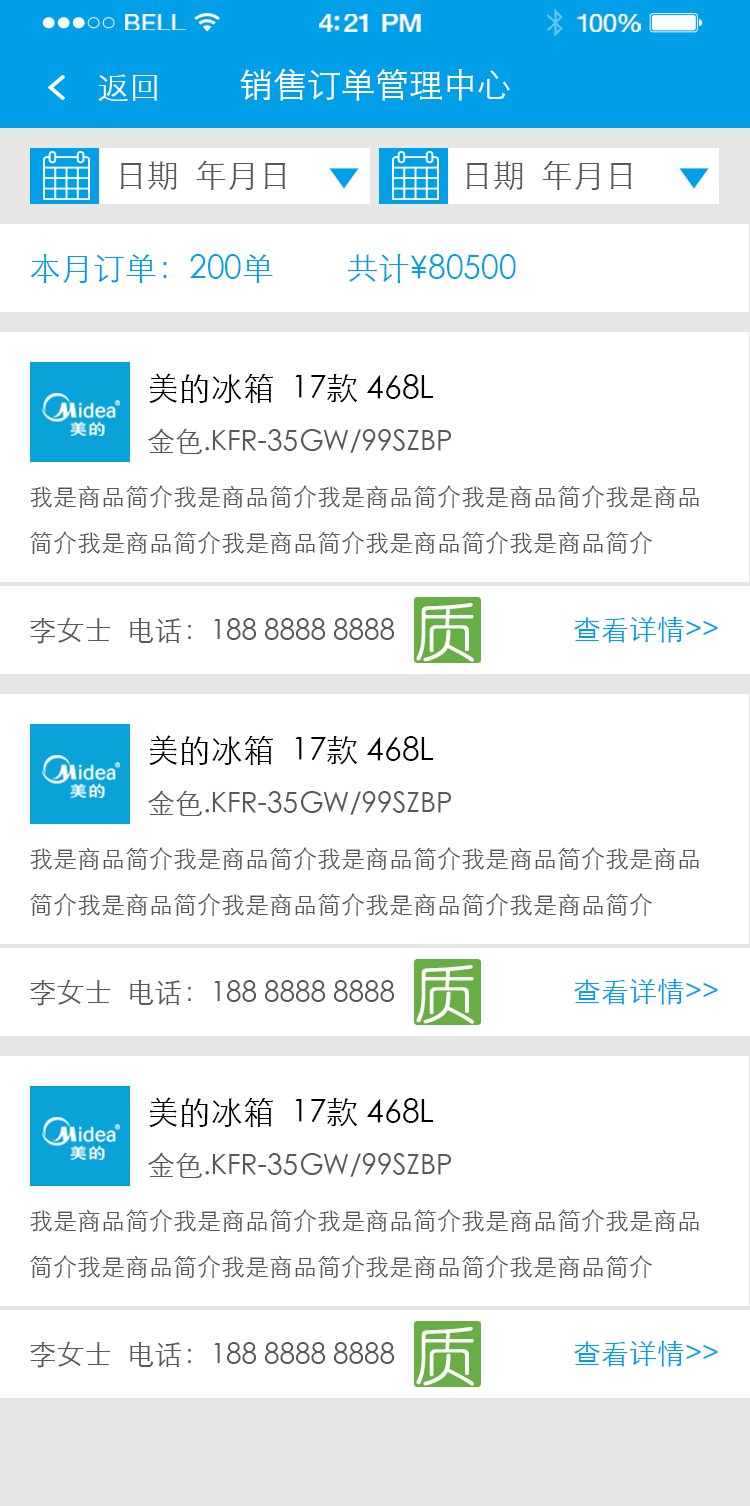
<style>
.page{position:relative;width:750px;height:1506px;background:#ffffff}
.page>*{position:absolute;margin:0}
.t1{font:23.3px "HelveticaNeue";letter-spacing:0.02em;color:#ffffff;scale:1.06 1}
.t2{font:25.3px "HelveticaNeue-Medium";letter-spacing:-0.02em;color:#ffffff;scale:1.06 1}
.t3{font:24.3px "HelveticaNeue";letter-spacing:-0.02em;color:#ffffff;scale:1.06 1}
.t4{font:32px "STXihei";color:#ffffff}
.t5{font:34px "STXihei";color:#ffffff}
.t6{font:32px "STXihei";color:#595757}
.t7{font:32px "STXihei";color:#009fe8}
.t8{font:28px/56px "STXihei";color:#595757}
.t9{font:32px/56px "STXihei";color:#000000}
.t10{font:24px/46px "STXihei";color:#595757}
.t11{font:28px "STXihei";color:#595757}
.t12{font:28px "STXihei";color:#009fe8}
</style>
<div class="page">
<p class="t1" style="left:125px;top:14px;width:61px;height:16px">BELL</p>
<p class="t2" style="left:319px;top:14px;width:102px;height:18px">4:21 PM</p>
<p class="t3" style="left:577px;top:14px;width:64px;height:18px">100%</p>
<p class="t4" style="left:98px;top:74px;width:59px;height:27px">返回</p>
<p class="t5" style="left:240px;top:68px;width:270px;height:33px">销售订单管理中心</p>
<p class="t6" style="left:120px;top:160px;width:166px;height:30px">日期  年月日</p>
<p class="t6" style="left:466px;top:160px;width:166px;height:30px">日期  年月日</p>
<p class="t7" style="left:30px;top:254px;width:486px;height:29px">本月订单：200单         共计¥80500</p>
<p class="t8" style="left:148px;top:373px;width:304px;height:81px"><span class="t9">美的冰箱  17款 468L    <br></span>金色.KFR-35GW/99SZBP</p>
<p class="t10" style="left:30px;top:485px;width:669px;height:69px">我是商品简介我是商品简介我是商品简介我是商品简介我是商品简介我是商品简介我是商品简介我是商品简介我是商品简介</p>
<p class="t11" style="left:30px;top:617px;width:365px;height:27px">李女士  电话：188 8888 8888</p>
<p class="t12" style="left:574px;top:616px;width:144px;height:27px">查看详情&gt;&gt;</p>
<p class="t8" style="left:148px;top:735px;width:304px;height:81px"><span class="t9">美的冰箱  17款 468L    <br></span>金色.KFR-35GW/99SZBP</p>
<p class="t10" style="left:30px;top:847px;width:669px;height:69px">我是商品简介我是商品简介我是商品简介我是商品简介我是商品简介我是商品简介我是商品简介我是商品简介我是商品简介</p>
<p class="t11" style="left:30px;top:979px;width:365px;height:27px">李女士  电话：188 8888 8888</p>
<p class="t12" style="left:574px;top:978px;width:144px;height:27px">查看详情&gt;&gt;</p>
<p class="t8" style="left:148px;top:1097px;width:304px;height:81px"><span class="t9">美的冰箱  17款 468L    <br></span>金色.KFR-35GW/99SZBP</p>
<p class="t10" style="left:30px;top:1209px;width:669px;height:69px">我是商品简介我是商品简介我是商品简介我是商品简介我是商品简介我是商品简介我是商品简介我是商品简介我是商品简介</p>
<p class="t11" style="left:30px;top:1341px;width:365px;height:27px">李女士  电话：188 8888 8888</p>
<p class="t12" style="left:574px;top:1340px;width:144px;height:27px">查看详情&gt;&gt;</p>
</div>
